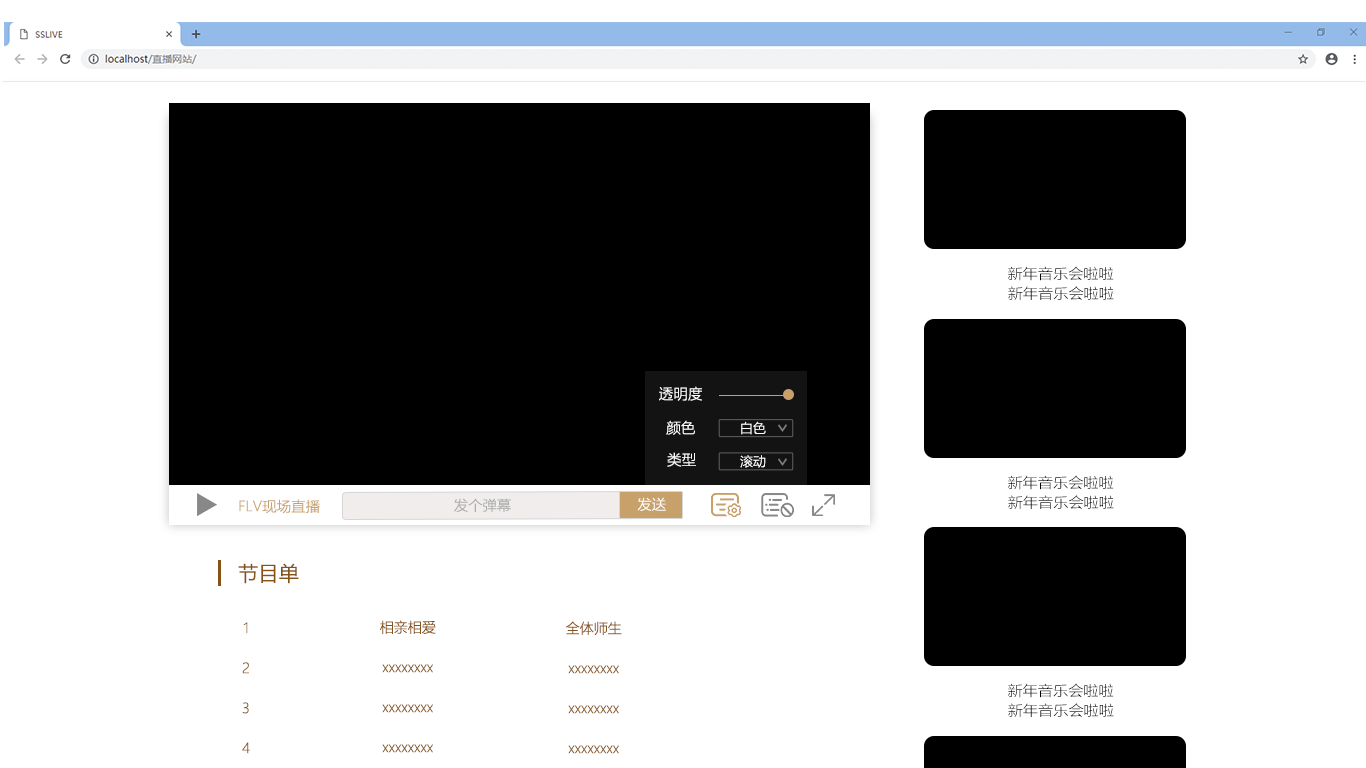
<style>
.page{position:relative;width:1366px;height:768px;background:#ffffff}
.page>*{position:absolute;margin:0}
.t1{font:14.3px/71.4px "MicrosoftYaHeiLight";color:#010100;scale:1.06 1}
.t2{font:14.3px "MicrosoftYaHeiLight";scale:1.06 1}
.t3{font:14.6px "MicrosoftYaHeiLight";color:#ffffff}
.t4{font:13px "MicrosoftYaHeiLight";color:#ffffff}
.t5{font:14px "MicrosoftYaHeiLight";color:#ffffff}
.t6{font:14px "MicrosoftYaHeiLight";color:#c8a06a;scale:1.04 1}
.t7{font:14px "MicrosoftYaHeiLight";color:#ababab}
.t8{font:20.3px "MicrosoftYaHei";color:#855317}
</style>
<div class="page">
<p class="t1" style="left:1008px;top:266px;width:106px;height:15px;text-align:center">新年音乐会啦啦<br><br><br><br><br><br><br><br><br><br><br><br><br><br><br><br><br><br><br><br><br><br>新年新年音乐盒</p>
<p class="t2" style="left:1008px;top:286px;width:106px;height:14px">新年音乐会啦啦</p>
<p class="t3" style="left:659px;top:386px;width:43px;height:15px">透明度</p>
<p class="t3" style="left:666px;top:420px;width:29px;height:15px">颜色</p>
<p class="t4" style="left:741px;top:421px;width:25px;height:14px">白色</p>
<p class="t3" style="left:667px;top:452px;width:29px;height:15px">类型</p>
<p class="t4" style="left:740px;top:455px;width:26px;height:13px">滚动</p>
<p class="t1" style="left:1008px;top:475px;width:106px;height:15px;text-align:center">新年音乐会啦啦<br><br><br><br><br><br><br><br><br><br><br><br><br><br><br><br><br><br><br><br><br><br>新年新年音乐盒</p>
<p class="t5" style="left:637px;top:497px;width:29px;height:14px">发送</p>
<p class="t2" style="left:1008px;top:495px;width:106px;height:14px">新年音乐会啦啦</p>
<p class="t6" style="left:239px;top:499px;width:81px;height:15px">FLV现场直播</p>
<p class="t7" style="left:454px;top:498px;width:57px;height:14px">发个弹幕</p>
<p class="t8" style="left:238px;top:563px;width:61px;height:21px">节目单</p>
<p class="t1" style="left:1008px;top:683px;width:106px;height:15px;text-align:center">新年音乐会啦啦<br><br><br><br><br><br><br><br><br><br><br><br><br><br><br><br><br><br><br><br><br><br>新年新年音乐盒</p>
<p class="t2" style="left:1008px;top:703px;width:106px;height:14px">新年音乐会啦啦</p>
</div>
